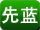
<style>
.page{position:relative;width:40px;height:30px}
.page>*{position:absolute;margin:0}
.t1{font:18px "HYb1gj";letter-spacing:0.05em;color:#ffffff;text-transform:uppercase}
</style>
<div class="page">
<p class="t1" style="left:1px;top:6px;width:37px;height:18px">先蓝</p>
</div>
